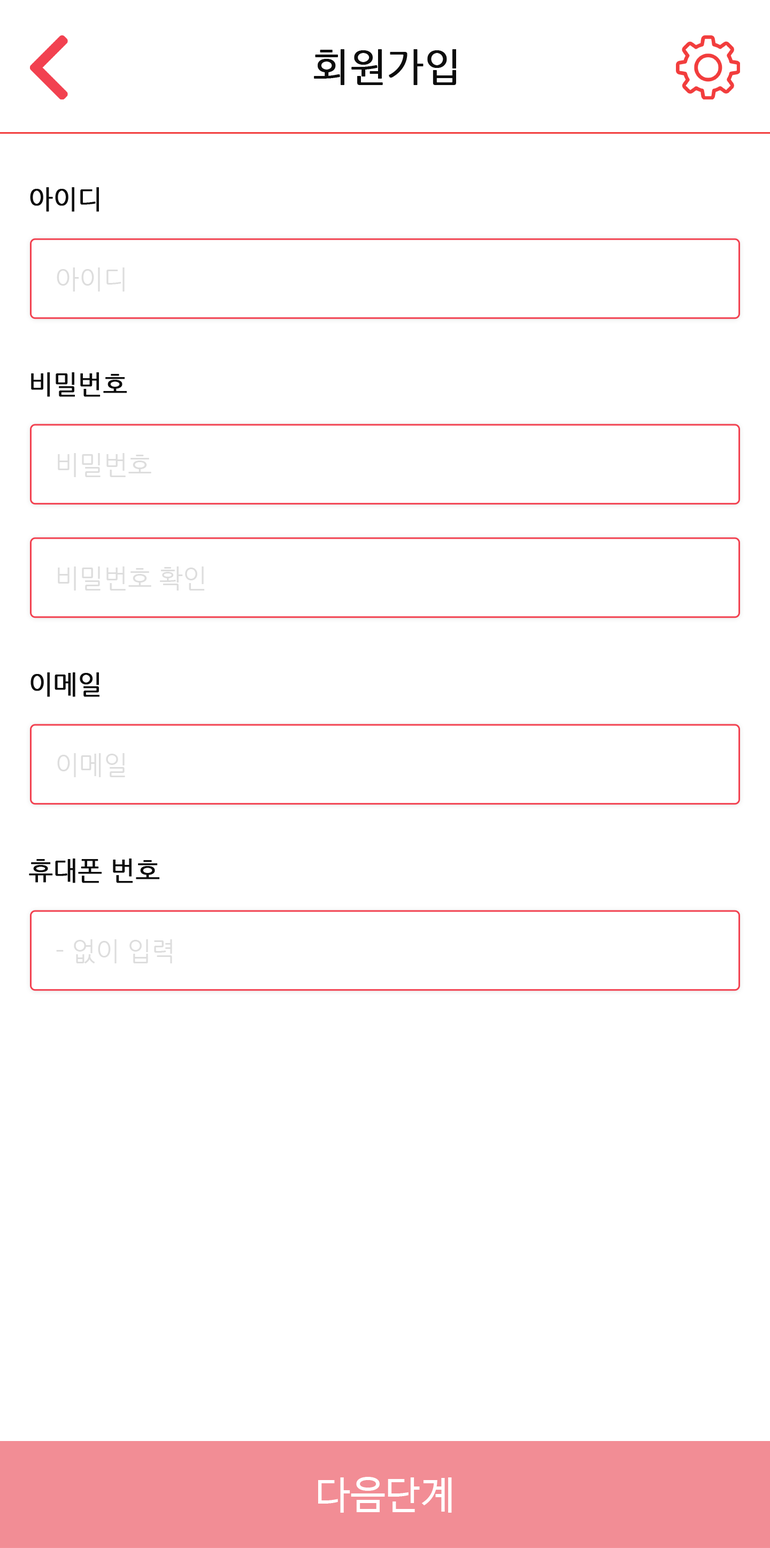
<style>
.page{position:relative;width:770px;height:1548px;background:#ffffff}
.page>*{position:absolute;margin:0}
.t1{font:38.5px "NanumGothic";color:#0d0d0d;font-weight:bold}
.t2{font:25.7px "NanumGothic";color:#0d0d0d;font-weight:bold}
.t3{font:25.7px "NanumGothic";color:#dddddd}
.t4{font:38.5px "NanumBarunGothic";letter-spacing:0.02em;color:#ffffff}
</style>
<div class="page">
<p class="t1" style="left:314px;top:49px;width:142px;height:36px">회원가입</p>
<p class="t2" style="left:30px;top:187px;width:69px;height:25px">아이디</p>
<p class="t3" style="left:57px;top:267px;width:68px;height:25px">아이디</p>
<p class="t2" style="left:31px;top:372px;width:96px;height:25px">비밀번호</p>
<p class="t3" style="left:58px;top:453px;width:93px;height:24px">비밀번호</p>
<p class="t3" style="left:58px;top:566px;width:147px;height:25px">비밀번호 확인</p>
<p class="t2" style="left:30px;top:672px;width:69px;height:25px">이메일</p>
<p class="t3" style="left:57px;top:753px;width:68px;height:24px">이메일</p>
<p class="t2" style="left:29px;top:859px;width:131px;height:24px">휴대폰 번호</p>
<p class="t3" style="left:56px;top:939px;width:116px;height:24px">- 없이 입력</p>
<p class="t4" style="left:318px;top:1477px;width:134px;height:36px">다음단계</p>
</div>
